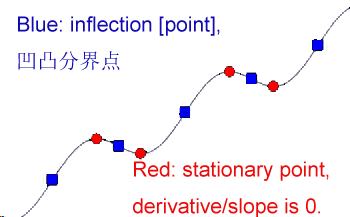
<style>
.page{position:relative;width:350px;height:217px;background:#ffffff}
.page>*{position:absolute;margin:0}
.t1{font:21px "ArialMT";color:#1109b1}
.t2{font:21px "SimSun";color:#1109b1}
.t3{font:21px "ArialMT";color:#ed0909}
</style>
<div class="page">
<p class="t1" style="left:18px;top:16px;width:202px;height:55px">Blue: inflection [point], <br><span class="t2">凹凸分界点</span></p>
<p class="t3" style="left:133px;top:161px;width:196px;height:57px">Red: stationary point, <br>derivative/slope is 0.</p>
</div>
